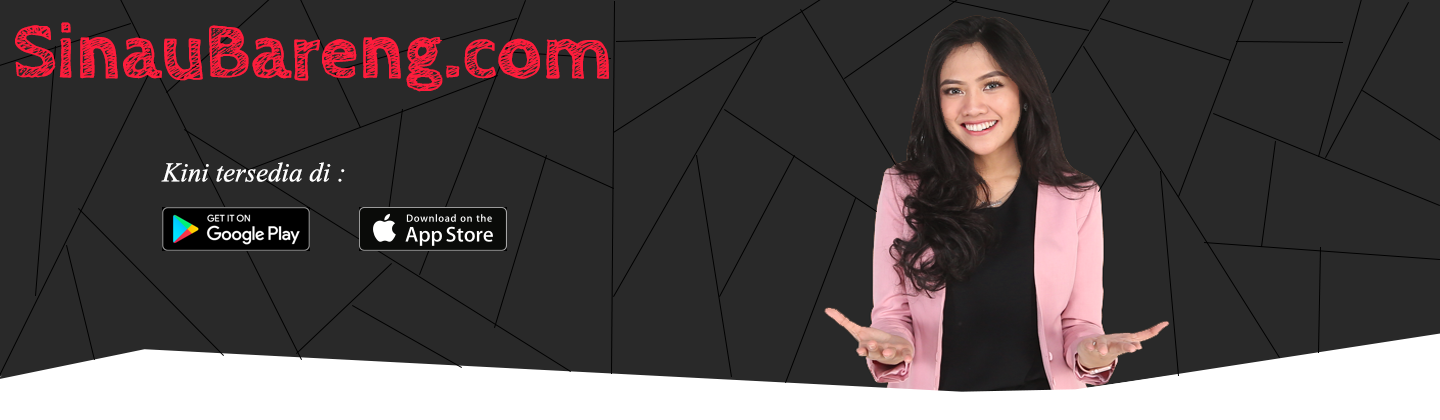
<style>
.page{position:relative;width:1440px;height:420px;background:#292929}
.page>*{position:absolute;margin:0}
.t1{font:79px "CabinSketch-Bold";color:#ff1c3c}
.t2{font:27px "TimesNewRomanPS-ItalicMT";color:#ffffff}
</style>
<div class="page">
<p class="t1" style="left:15px;top:22px;width:594px;height:70px">SinauBareng.com</p>
<p class="t2" style="left:161px;top:162px;width:184px;height:20px">Kini tersedia di :</p>
</div>
